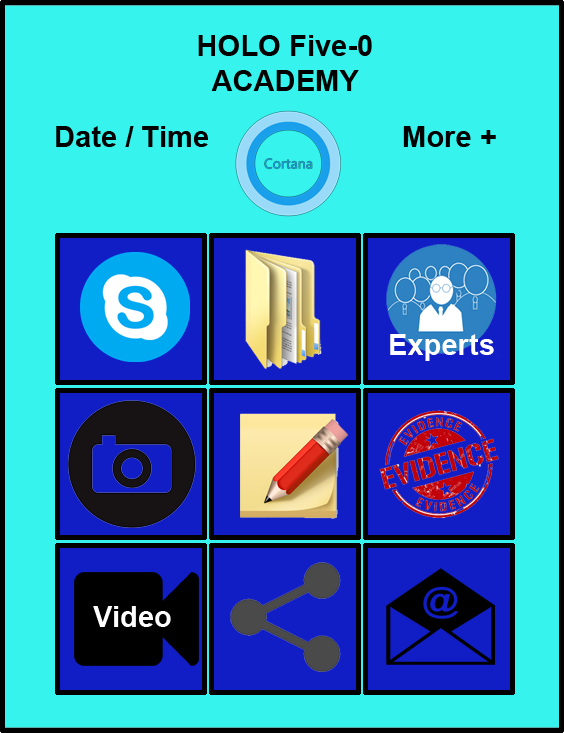
<style>
.page{position:relative;width:564px;height:733px;background:#36f4ed}
.page>*{position:absolute;margin:0}
.t1{font:29.2px "Arial-BoldMT";color:#020202}
.t2{font:29.2px "Arial-BoldMT";color:#ffffff}
</style>
<div class="page">
<p class="t1" style="left:198px;top:35px;width:174px;height:56px;text-align:center">HOLO Five-0<br>ACADEMY</p>
<p class="t1" style="left:56px;top:126px;width:152px;height:21px">Date / Time</p>
<p class="t1" style="left:403px;top:126px;width:93px;height:21px">More +</p>
<p class="t2" style="left:390px;top:334px;width:104px;height:27px">Experts</p>
<p class="t2" style="left:93px;top:606px;width:78px;height:21px">Video</p>
</div>
